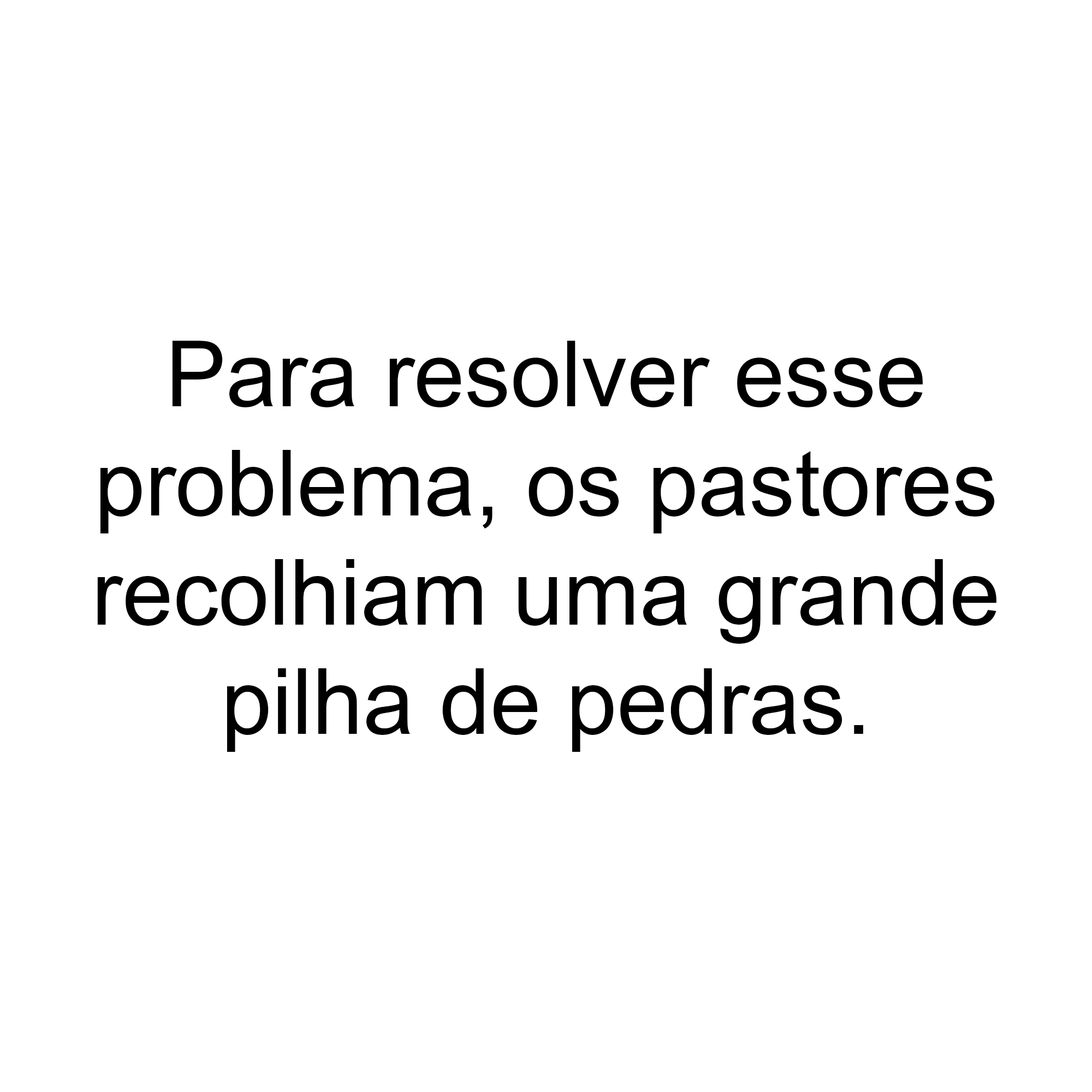
<style>
.page{position:relative;width:1092px;height:1092px;background:#ffffff}
.page>*{position:absolute;margin:0}
.t1{font:91px "ArialMT";color:#000000}
</style>
<div class="page">
<p class="t1" style="left:97px;top:341px;width:899px;height:411px;text-align:center">Para resolver esse<br>problema, os pastores<br>recolhiam uma grande<br>pilha de pedras.</p>
</div>
